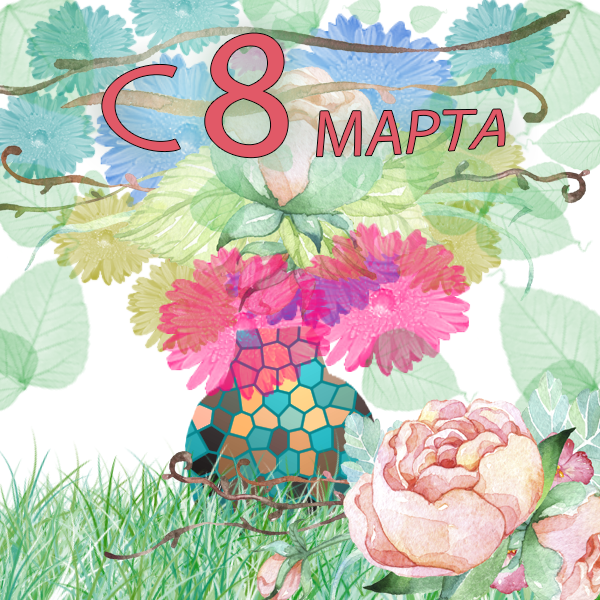
<style>
.page{position:relative;width:600px;height:600px}
.page>*{position:absolute;margin:0}
.t1{font:53.3px "MyriadPro-Regular";color:#e15967}
.t2{font:112.3px "MyriadPro-Regular";color:#e15967}
.t3{font:150.4px "MyriadPro-Regular";color:#e15967}
</style>
<div class="page">
<p class="t1" style="left:102px;top:33px;width:403px;height:125px"><span class="t2">С </span><span class="t3">8 </span>МАРТА</p>
</div>
